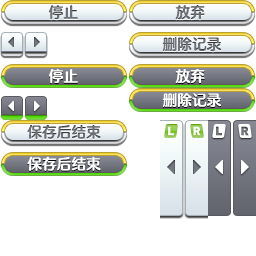
<style>
.page{position:relative;width:256px;height:256px;background:#ffffff}
.page>*{position:absolute;margin:0}
.t1{font:14.7px "FZFW-QingYinTiS-B--GB1-0";color:#6e737b}
.t2{font:14.7px "FZFW-QingYinTiS-B--GB1-0";color:#ffffff}
</style>
<div class="page">
<p class="t1" style="left:49px;top:5px;width:29px;height:15px">停止</p>
<p class="t1" style="left:175px;top:5px;width:30px;height:15px">放弃</p>
<p class="t1" style="left:162px;top:37px;width:59px;height:15px">删除记录</p>
<p class="t2" style="left:49px;top:69px;width:29px;height:15px">停止</p>
<p class="t2" style="left:175px;top:69px;width:30px;height:15px">放弃</p>
<p class="t2" style="left:162px;top:93px;width:59px;height:14px">删除记录</p>
<p class="t1" style="left:27px;top:124px;width:74px;height:15px">保存后结束</p>
<p class="t2" style="left:27px;top:156px;width:74px;height:15px">保存后结束</p>
</div>
